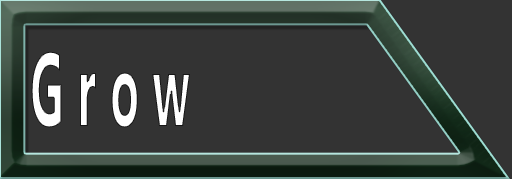
<style>
.page{position:relative;width:512px;height:179px;background:#333333}
.page>*{position:absolute;margin:0}
.t1{font:103.9px "SegoeWP-Bold";letter-spacing:0.28em;color:#ffffff;scale:0.46 1}
</style>
<div class="page">
<p class="t1" style="left:31px;top:51px;width:159px;height:77px">Grow</p>
</div>
